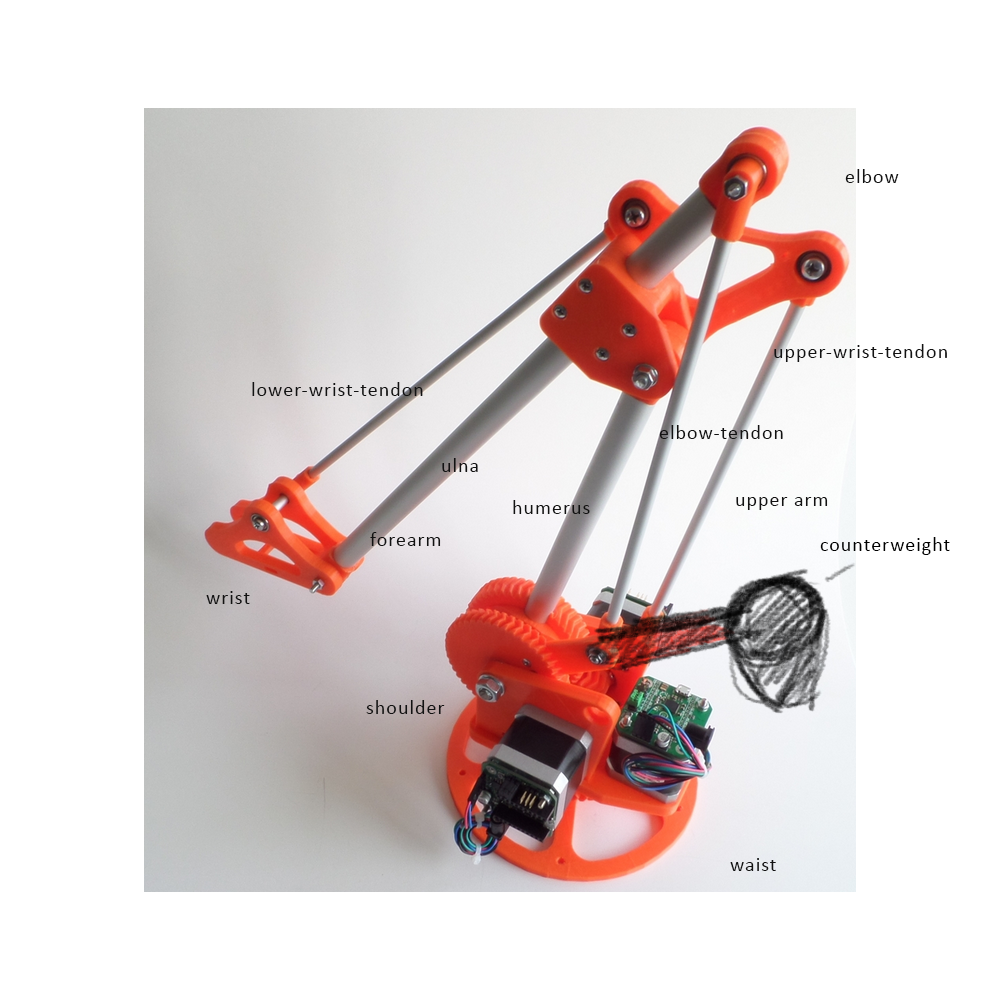
<style>
.page{position:relative;width:1000px;height:1000px;background:#ffffff}
.page>*{position:absolute;margin:0}
.t1{font:20px "Calibri";letter-spacing:0.05em;color:#121212}
.t2{font:20px "Calibri";letter-spacing:0.05em;color:#000000}
</style>
<div class="page">
<p class="t1" style="left:845px;top:169px;width:54px;height:14px">elbow</p>
<p class="t1" style="left:774px;top:344px;width:173px;height:18px">upper-wrist-tendon</p>
<p class="t1" style="left:252px;top:382px;width:171px;height:14px">lower-wrist-tendon</p>
<p class="t1" style="left:659px;top:425px;width:124px;height:14px">elbow-tendon</p>
<p class="t1" style="left:442px;top:458px;width:36px;height:14px">ulna</p>
<p class="t1" style="left:736px;top:497px;width:92px;height:13px">upper arm</p>
<p class="t1" style="left:513px;top:500px;width:77px;height:14px">humerus</p>
<p class="t1" style="left:370px;top:532px;width:71px;height:14px">forearm</p>
<p class="t2" style="left:820px;top:537px;width:130px;height:18px">counterweight</p>
<p class="t1" style="left:206px;top:591px;width:44px;height:13px">wrist</p>
<p class="t1" style="left:366px;top:700px;width:79px;height:14px">shoulder</p>
<p class="t1" style="left:730px;top:858px;width:46px;height:13px">waist</p>
</div>
